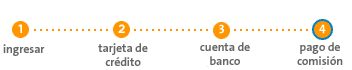
<style>
.page{position:relative;width:352px;height:70px;background:#ffffff}
.page>*{position:absolute;margin:0}
.t1{font:12px "TheSansBAC-Bold";letter-spacing:-0.01em;color:#666666}
</style>
<div class="page">
<p class="t1" style="left:3px;top:44px;width:42px;height:12px">ingresar</p>
<p class="t1" style="left:98px;top:43px;width:50px;height:23px;text-align:center">tarjeta de<br>crédito</p>
<p class="t1" style="left:200px;top:42px;width:50px;height:23px;text-align:center">cuenta de<br>banco</p>
<p class="t1" style="left:297px;top:42px;width:46px;height:23px;text-align:center">pago de<br>comisión</p>
</div>
